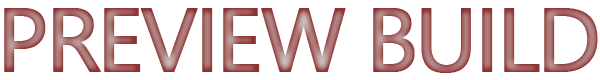
<style>
.page{position:relative;width:600px;height:80px;background:#ffffff}
.page>*{position:absolute;margin:0}
.t1{font:90px "SegoeUI";letter-spacing:-0.05em;text-transform:uppercase;font-weight:bold}
</style>
<div class="page">
<p class="t1" style="left:4px;top:8px;width:594px;height:65px">Preview BUILD</p>
</div>
